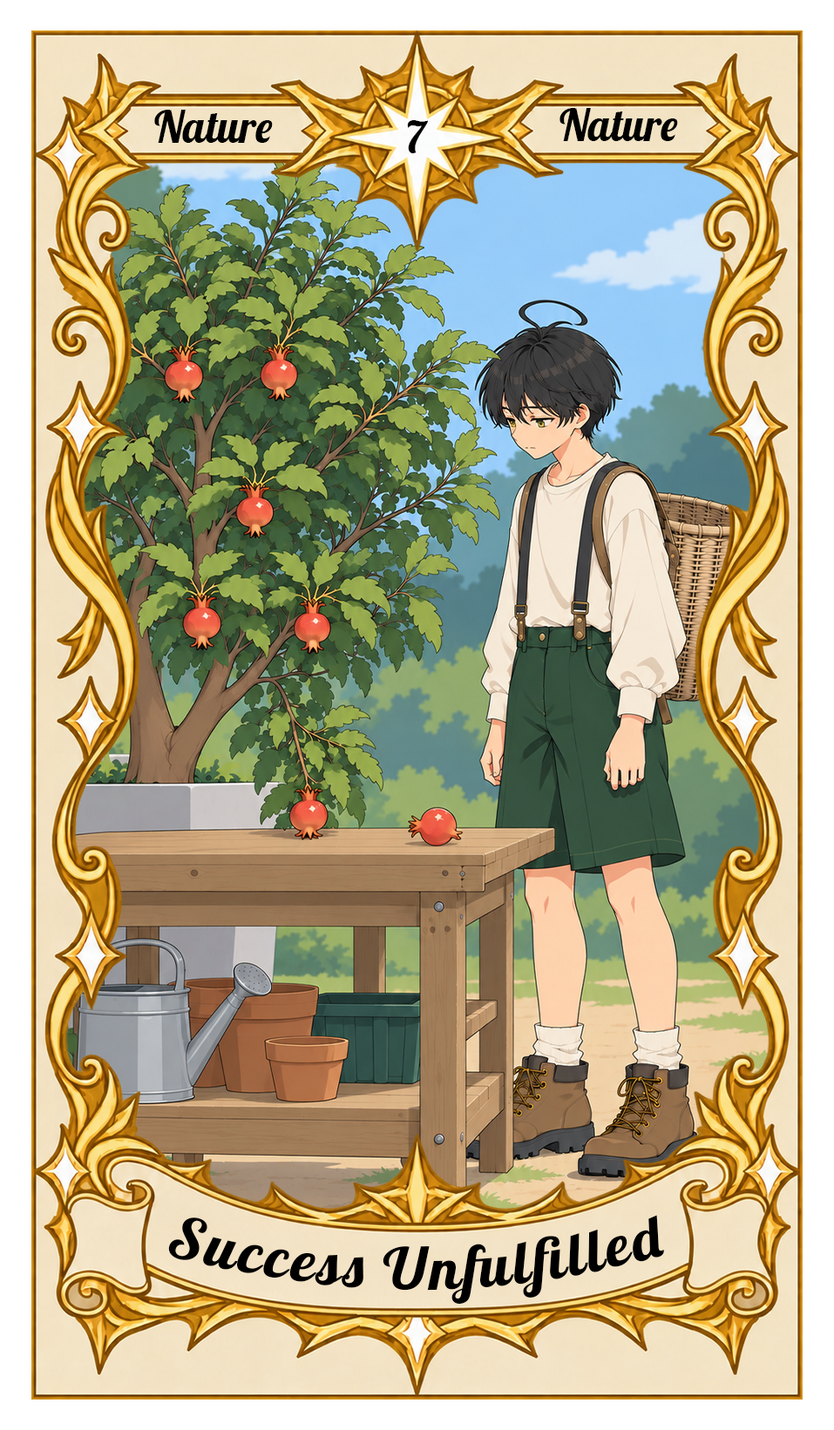
<style>
.page{position:relative;width:834px;height:1430px}
.page>*{position:absolute;margin:0}
.t1{font:43.6px "Lobster-Regular";color:#000000}
.t2{font:58.1px "Lobster-Regular";letter-spacing:0.05em;color:#000000}
</style>
<div class="page">
<p class="t1" style="left:154px;top:110px;width:119px;height:33px">Nature</p>
<p class="t1" style="left:559px;top:108px;width:119px;height:33px">Nature</p>
<p class="t1" style="left:407px;top:120px;width:21px;height:33px">7</p>
<p class="t2" style="left:168px;top:1215px;width:496px;height:90px">Success Unfulfilled</p>
</div>
